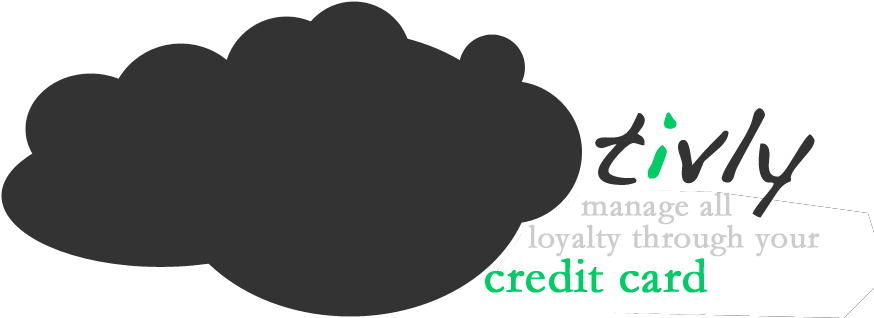
<style>
.page{position:relative;width:874px;height:318px;background:#ffffff}
.page>*{position:absolute;margin:0}
.t1{font:102px "Handwriting-Dakota";letter-spacing:0.01em;color:#333333;font-weight:bold}
.t2{font:102px "Handwriting-Dakota";letter-spacing:0.01em;color:#00cc66;font-weight:bold}
.t3{font:34px "Garamond";letter-spacing:0.01em;color:#cccccc;font-weight:bold}
.t4{font:50px "Garamond";letter-spacing:0.01em;color:#00cc66;font-weight:bold}
</style>
<div class="page">
<p class="t1" style="left:595px;top:108px;width:220px;height:110px">t<span class="t2">i</span>vly</p>
<p class="t3" style="left:581px;top:192px;width:151px;height:33px">manage all</p>
<p class="t3" style="left:528px;top:224px;width:292px;height:33px">loyalty through your</p>
<p class="t4" style="left:485px;top:258px;width:223px;height:35px">credit card</p>
</div>
